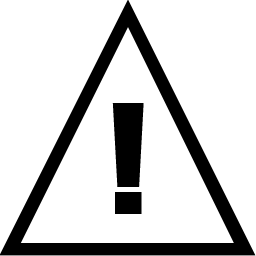
<style>
.page{position:relative;width:256px;height:256px;background:#ffffff}
.page>*{position:absolute;margin:0}
.t1{font:141.1px "Impact";color:#000000}
</style>
<div class="page">
<p class="t1" style="left:112px;top:103px;width:32px;height:111px">!</p>
</div>
